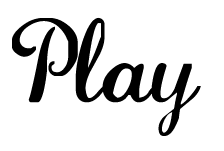
<style>
.page{position:relative;width:224px;height:151px;background:#ffffff}
.page>*{position:absolute;margin:0}
.t1{font:84.2px "LaurenScript";letter-spacing:-0.02em;color:#000000}
</style>
<div class="page">
<p class="t1" style="left:12px;top:17px;width:189px;height:119px">Play</p>
</div>
